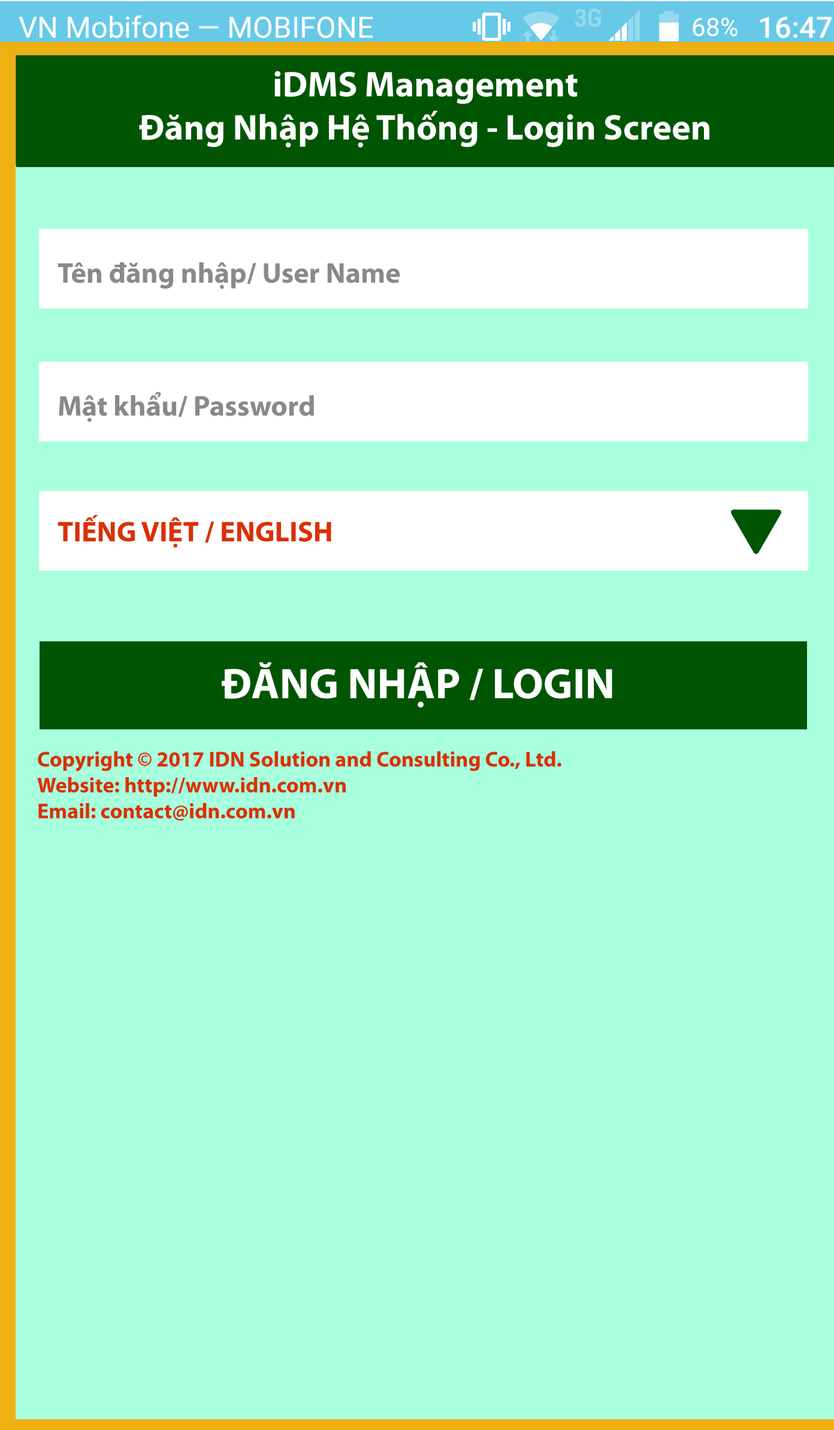
<style>
.page{position:relative;width:834px;height:1430px;background:#a8ffdd}
.page>*{position:absolute;margin:0}
.t1{font:35.9px "MyriadPro-Bold";color:#ffffff}
.t2{font:28.7px "MyriadPro-Bold";color:#8a8989}
.t3{font:28.7px "MyriadPro-Bold";color:#d93104}
.t4{font:43.1px "MyriadPro-Bold";color:#ffffff}
.t5{font:21.6px "MyriadPro-Bold";color:#d93104}
</style>
<div class="page">
<p class="t1" style="left:139px;top:71px;width:570px;height:77px;text-align:center">iDMS Management<br>Đăng Nhập Hệ Thống - Login Screen</p>
<p class="t2" style="left:57px;top:262px;width:343px;height:27px">Tên đăng nhập/ User Name</p>
<p class="t2" style="left:59px;top:392px;width:255px;height:30px">Mật khẩu/ Password</p>
<p class="t3" style="left:57px;top:515px;width:274px;height:33px">TIẾNG VIỆT / ENGLISH</p>
<p class="t4" style="left:222px;top:662px;width:390px;height:46px">ĐĂNG NHẬP / LOGIN</p>
<p class="t5" style="left:37px;top:751px;width:524px;height:70px">Copyright © 2017 IDN Solution and Consulting Co., Ltd.<br>Website: http://www.idn.com.vn<br>Email: contact@idn.com.vn</p>
</div>
